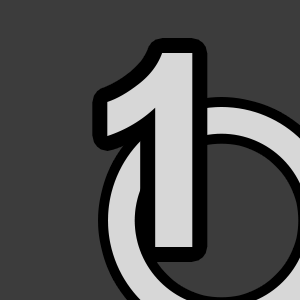
<style>
.page{position:relative;width:300px;height:300px;background:#3c3c3c}
.page>*{position:absolute;margin:0}
.t1{font:269.8px "Arial-BoldMT";color:#d7d7d7}
</style>
<div class="page">
<p class="t1" style="left:107px;top:53px;width:86px;height:194px">1</p>
</div>
